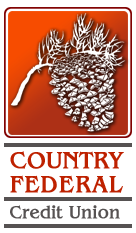
<style>
.page{position:relative;width:136px;height:233px;background:#ffffff}
.page>*{position:absolute;margin:0}
.t1{font:24px "BangleBold";letter-spacing:0.025em;color:#be2100}
.t2{font:24px "BangleBold";letter-spacing:0.07em;color:#be2100}
.t3{font:18px "BangleBold";letter-spacing:0.025em;color:#565252}
</style>
<div class="page">
<p class="t1" style="left:10px;top:151px;width:114px;height:18px">COUNTRY</p>
<p class="t2" style="left:10px;top:175px;width:113px;height:18px">FEDERAL</p>
<p class="t3" style="left:10px;top:205px;width:110px;height:14px">Credit Union</p>
</div>
